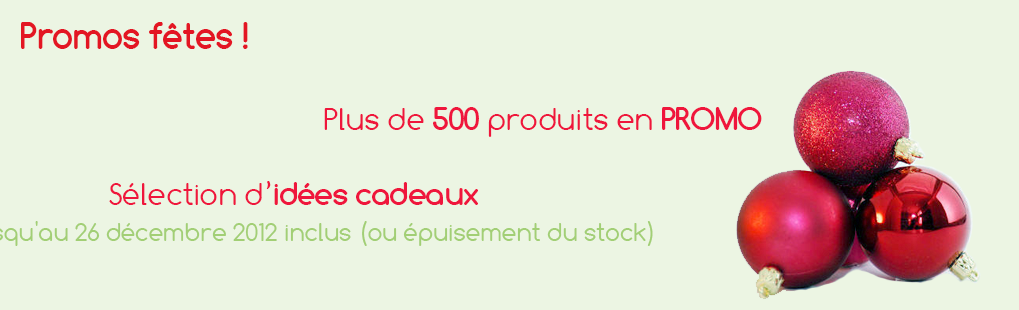
<style>
.page{position:relative;width:1019px;height:310px;background:#ecf5e3}
.page>*{position:absolute;margin:0}
.t1{font:36px "Comfortaa-Bold";color:#e31623}
.t2{font:32px "Comfortaa";color:#ef163c}
.t3{font:32px "Comfortaa-Bold";color:#ef163c}
</style>
<div class="page">
<p class="t1" style="left:21px;top:22px;width:227px;height:27px">Promos fêtes !</p>
<p class="t2" style="left:324px;top:107px;width:438px;height:30px">Plus de <span class="t3">500</span> produits en <span class="t3">PROMO</span></p>
<p class="t3" style="left:109px;top:181px;width:369px;height:24px"><span class="t2">Sélection d’</span>idées cadeaux</p>
</div>
